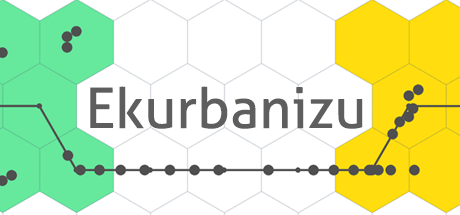
<style>
.page{position:relative;width:460px;height:215px;background:#ffffff}
.page>*{position:absolute;margin:0}
.t1{font:56px "Aller";color:#5e5e5e}
</style>
<div class="page">
<p class="t1" style="left:90px;top:86px;width:273px;height:43px">Ekurbanizu</p>
</div>
